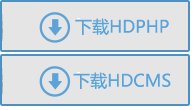
<style>
.page{position:relative;width:195px;height:110px;background:#e5e5e5}
.page>*{position:absolute;margin:0}
.t1{font:17px "MicrosoftYaHei";color:#5da3d7}
</style>
<div class="page">
<p class="t1" style="left:75px;top:18px;width:94px;height:17px">下载HDPHP</p>
<p class="t1" style="left:73px;top:72px;width:98px;height:17px">下载HDCMS</p>
</div>
